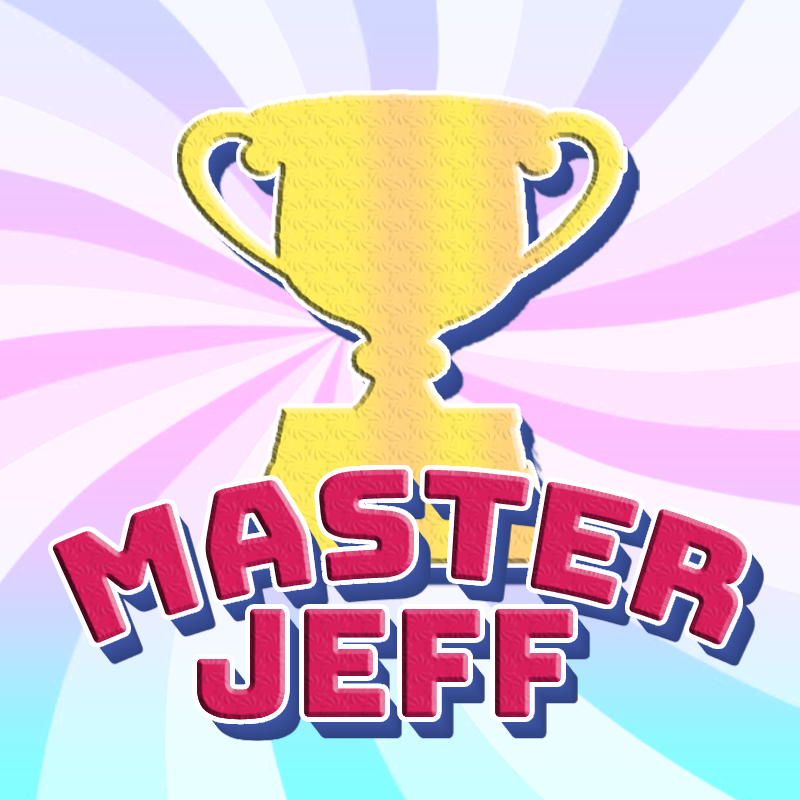
<style>
.page{position:relative;width:800px;height:800px}
.page>*{position:absolute;margin:0}
.t1{font:150px "BungeeTint-Regular"}
.t2{font:150px "BungeeSpice-Regular"}
</style>
<div class="page">
<p class="t1" style="left:52px;top:469px;width:696px;height:177px">Master</p>
<p class="t2" style="left:197px;top:609px;width:377px;height:111px">Jeff</p>
</div>
